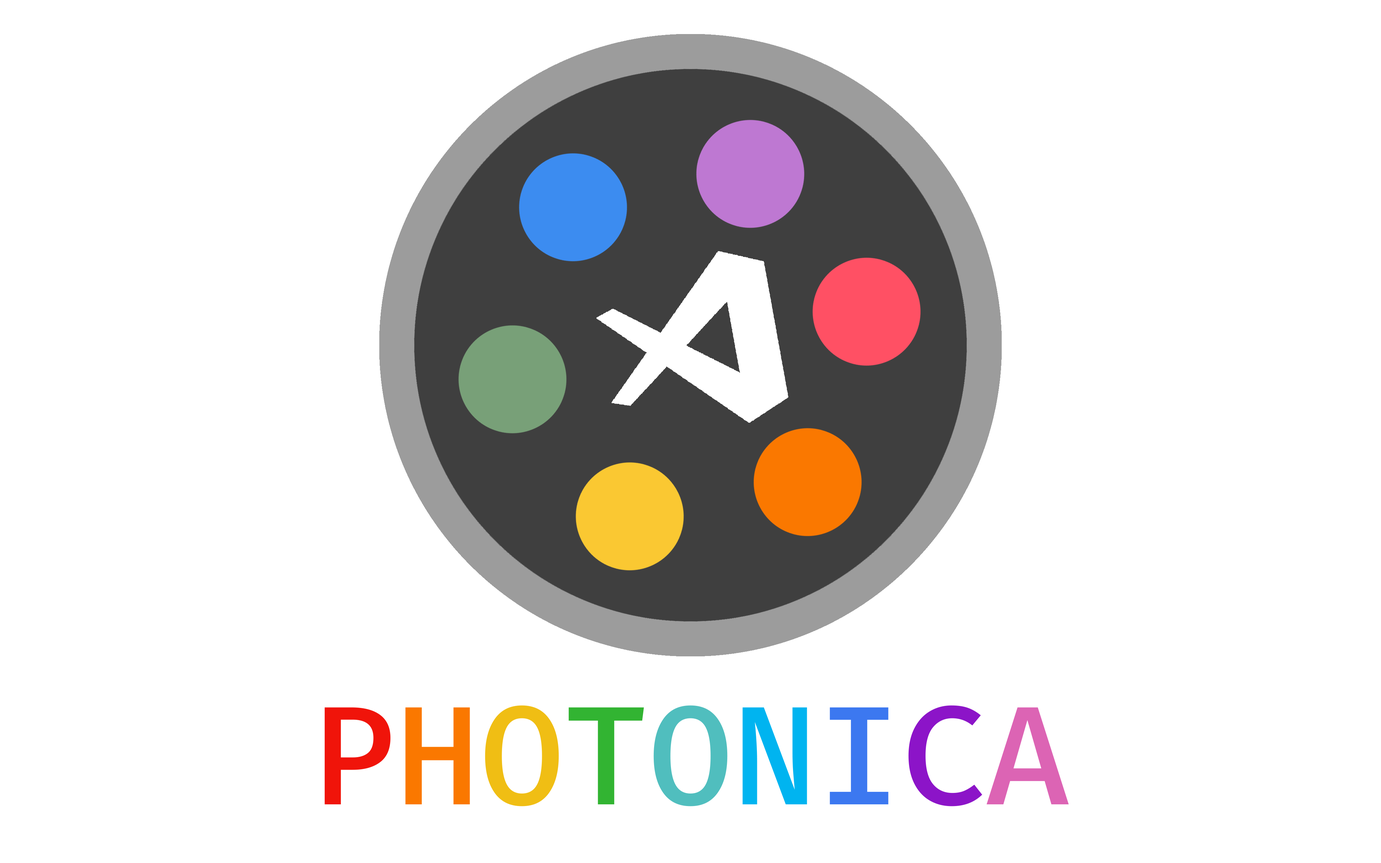
<style>
.page{position:relative;width:1381px;height:863px;background:#ffffff}
.page>*{position:absolute;margin:0}
.t1{font:140.5px "FiraMono-Medium";color:#f0140a}
.t2{font:140.5px "FiraMono-Medium";color:#fa7800}
.t3{font:140.5px "FiraMono-Medium";color:#f0be14}
.t4{font:140.5px "FiraMono-Medium";color:#32b432}
.t5{font:140.5px "FiraMono-Medium";color:#50bebe}
.t6{font:140.5px "FiraMono-Medium";color:#00b4f0}
.t7{font:140.5px "FiraMono-Medium";color:#3c78f0}
.t8{font:140.5px "FiraMono-Medium";color:#8c14c8}
.t9{font:140.5px "FiraMono-Medium";color:#dc64b4}
</style>
<div class="page">
<p class="t1" style="left:325px;top:705px;width:744px;height:102px">P<span class="t2">H</span><span class="t3">O</span><span class="t4">T</span><span class="t5">O</span><span class="t6">N</span><span class="t7">I</span><span class="t8">C</span><span class="t9">A</span></p>
</div>
